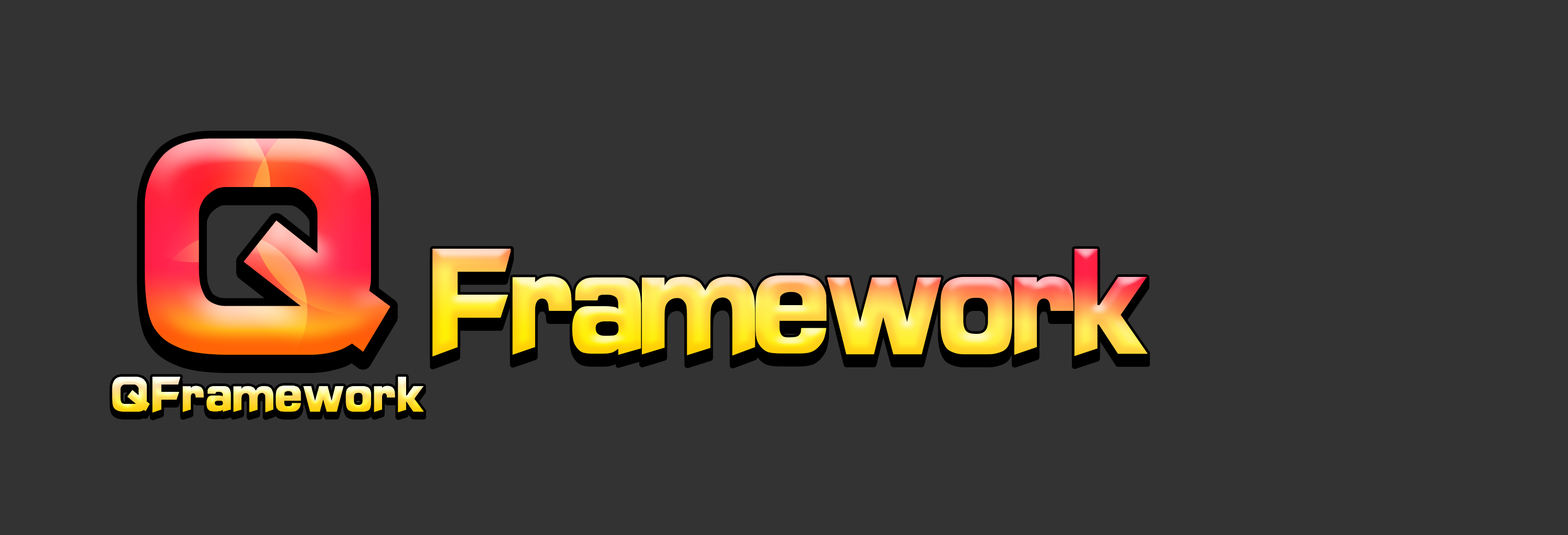
<style>
.page{position:relative;width:1568px;height:535px;background:#333333}
.page>*{position:absolute;margin:0}
.t1{font:324.1px "JLinXin";scale:0.95 1}
.t2{font:156.8px "JLinXin";letter-spacing:-0.1em;scale:0.85 1}
.t3{font:52.3px "JLinXin";letter-spacing:-0.05em;scale:0.9 1}
</style>
<div class="page">
<p class="t1" style="left:145px;top:139px;width:245px;height:216px">Q</p>
<p class="t2" style="left:432px;top:249px;width:716px;height:108px">Framework</p>
<p class="t3" style="left:112px;top:377px;width:312px;height:36px">QFramework</p>
</div>
